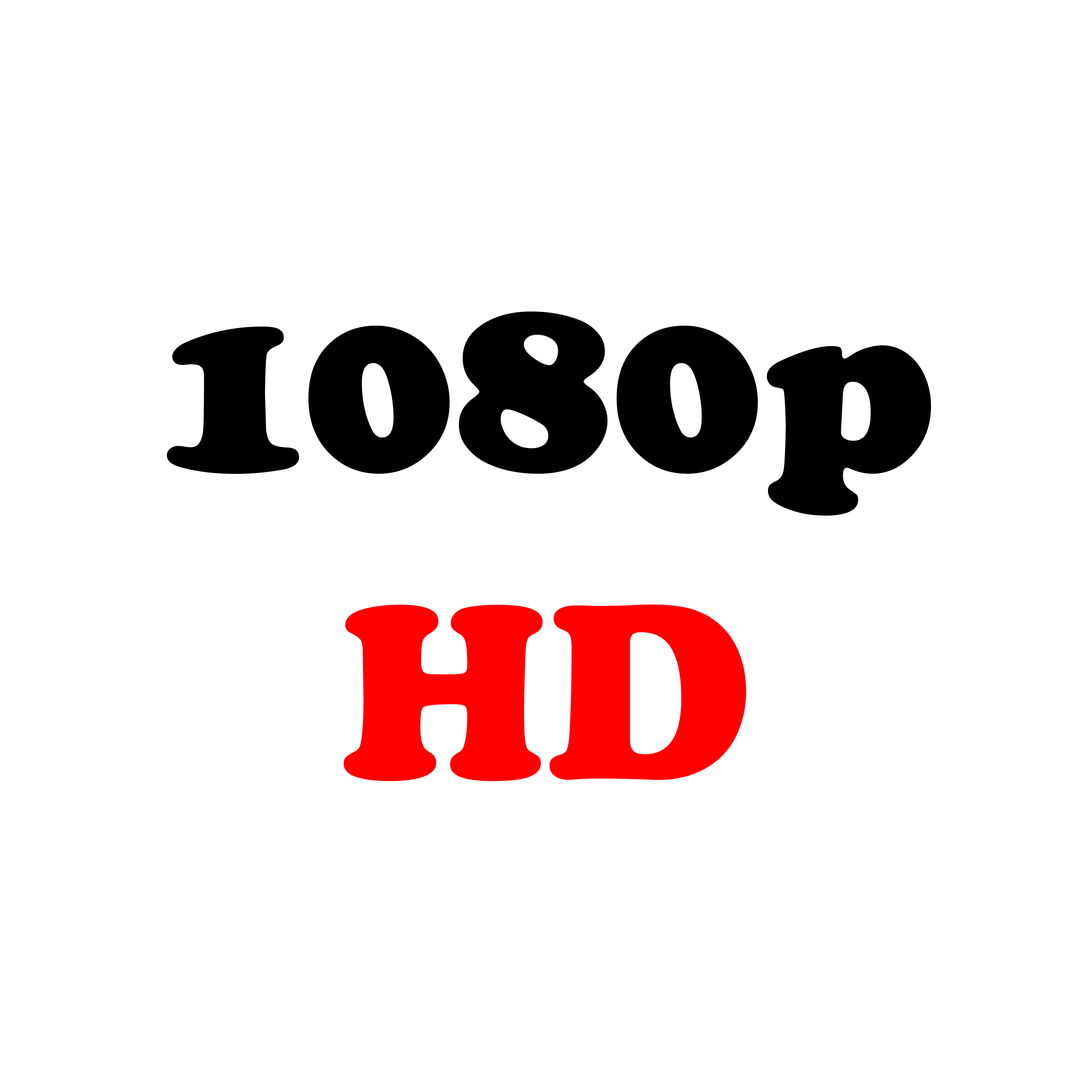
<style>
.page{position:relative;width:1092px;height:1092px;background:#ffffff}
.page>*{position:absolute;margin:0}
.t1{font:256.8px "CooperBlack";color:#000000}
.t2{font:256.8px "CooperBlack";color:#ff0000}
</style>
<div class="page">
<p class="t1" style="left:167px;top:311px;width:764px;height:470px;text-align:center">1080p<br><span class="t2">HD</span></p>
</div>
